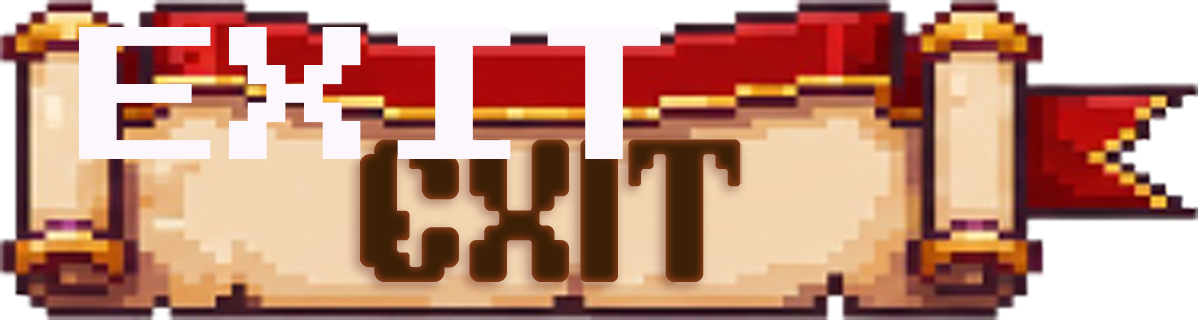
<style>
.page{position:relative;width:1200px;height:320px}
.page>*{position:absolute;margin:0}
.t1{font:150px "PressStart2P-Regular";color:#fcf6fd}
</style>
<div class="page">
<p class="t1" style="left:79px;top:27px;width:582px;height:132px">EXIT</p>
</div>
